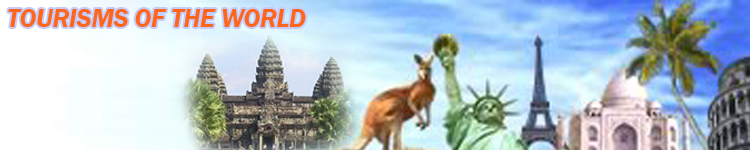
<style>
.page{position:relative;width:750px;height:150px}
.page>*{position:absolute;margin:0}
.t1{font:25.6px "FranklinGothic-DemiItalic";color:#fe661b}
</style>
<div class="page">
<p class="t1" style="left:8px;top:9px;width:298px;height:18px">TOURISMS OF THE WORLD</p>
</div>
